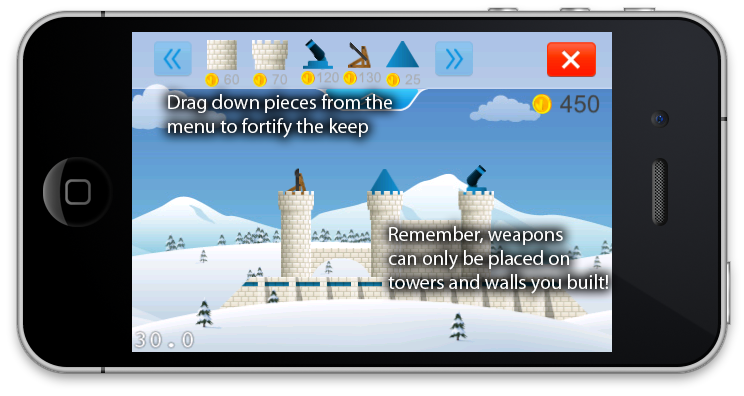
<style>
.page{position:relative;width:744px;height:396px}
.page>*{position:absolute;margin:0}
.t1{font:20px "MyriadPro-Regular";color:#ffffff}
</style>
<div class="page">
<p class="t1" style="left:168px;top:94px;width:224px;height:44px">Drag down pieces from the <br>menu to fortify the keep</p>
<p class="t1" style="left:388px;top:226px;width:220px;height:68px">Remember, weapons<br>can only be placed on <br>towers and walls you built!</p>
</div>
